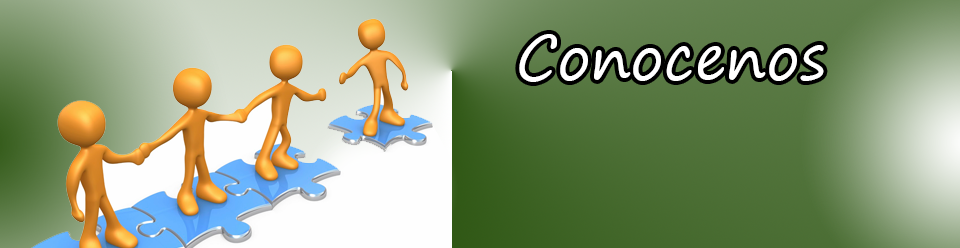
<style>
.page{position:relative;width:960px;height:248px}
.page>*{position:absolute;margin:0}
.t1{font:60px "SegoePrint";color:#ffffff}
</style>
<div class="page">
<p class="t1" style="left:519px;top:34px;width:305px;height:48px">Conocenos</p>
</div>
